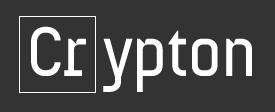
<style>
.page{position:relative;width:275px;height:112px;background:#333333}
.page>*{position:absolute;margin:0}
.t1{font:72px "AUdimat-Regular";letter-spacing:-0.02em;color:#ffffff}
.t2{font:72px "AUdimat-Regular";letter-spacing:0.22em;color:#ffffff}
</style>
<div class="page">
<p class="t1" style="left:31px;top:26px;width:221px;height:66px">C<span class="t2">r</span>ypton</p>
</div>
